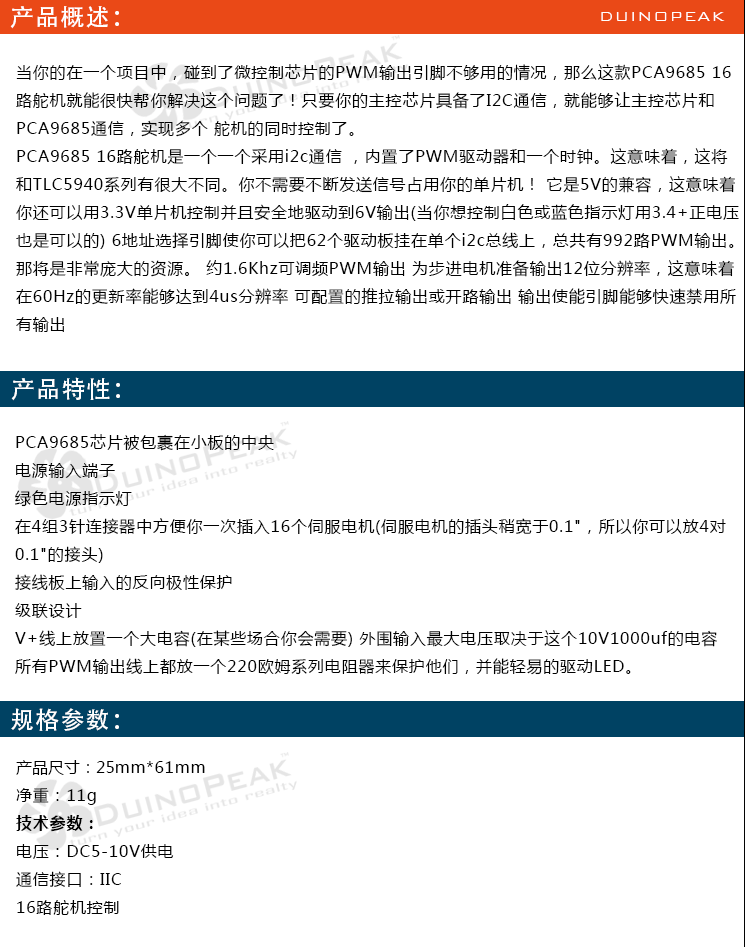
<style>
.page{position:relative;width:745px;height:947px;background:#ffffff}
.page>*{position:absolute;margin:0}
.t1{font:24px "AdobeHeitiStd-Regular";letter-spacing:0.05em;color:#ffffff}
.t2{font:18px "BankGothicBT-Light";letter-spacing:0.05em;color:#ffffff}
.t3{font:16px "MicrosoftYaHei";letter-spacing:0.05em;color:#000000}
.t4{font:16px "MicrosoftYaHei";color:#000000}
.t5{font:16px "MicrosoftYaHei-Bold";letter-spacing:0.05em;color:#000000}
</style>
<div class="page">
<p class="t1" style="left:10px;top:6px;width:109px;height:23px">产品概述：</p>
<p class="t2" style="left:601px;top:12px;width:124px;height:9px">DUINOPEAK</p>
<p class="t3" style="left:16px;top:64px;width:723px;height:268px">当你的在一个项目中，碰到了微控制芯片的PWM输出引脚不够用的情况，那么这款PCA9685 16<br>路舵机就能很快帮你解决这个问题了！只要你的主控芯片具备了I2C通信，就能够让主控芯片和<br>PCA9685通信，实现多个 舵机的同时控制了。 <br>PCA9685 16路舵机是一个一个采用i2c通信 ，内置了PWM驱动器和一个时钟。这意味着，这将<br>和TLC5940系列有很大不同。你不需要不断发送信号占用你的单片机！ 它是5V的兼容，这意味着<br>你还可以用3.3V单片机控制并且安全地驱动到6V输出(当你想控制白色或蓝色指示灯用3.4+正电压<br>也是可以的) 6地址选择引脚使你可以把62个驱动板挂在单个i2c总线上，总共有992路PWM输出。<br>那将是非常庞大的资源。 约1.6Khz可调频PWM输出 为步进电机准备输出12位分辨率，这意味着<br>在60Hz的更新率能够达到4us分辨率 可配置的推拉输出或开路输出 输出使能引脚能够快速禁用所<br>有输出</p>
<p class="t1" style="left:11px;top:377px;width:109px;height:24px">产品特性：</p>
<p class="t3" style="left:15px;top:434px;width:711px;height:241px">PCA9685芯片被包裹在小板的中央<br>电源输入端子<br>绿色电源指示灯<br>在4组3针连接器中方便你一次插入16个伺服电机(伺服电机的插头稍宽于0.1"，所以你可以放4对<br>0.1"的接头)<br>接线板上输入的反向极性保护<br>级联设计<br>V+线上放置一个大电容(在某些场合你会需要) 外围输入最大电压取决于这个10V1000uf的电容<br>所有PWM输出线上都放一个220欧姆系列电阻器来保护他们，并能轻易的驱动LED。</p>
<p class="t1" style="left:11px;top:708px;width:108px;height:23px">规格参数：</p>
<p class="t3" style="left:16px;top:760px;width:189px;height:155px"><span class="t4">产品尺寸：25</span>mm*61mm<br>净重：11g<br><span class="t5">技术参数：<br></span>电压：DC5-10V供电<br>通信接口：IIC<br>16路舵机控制</p>
</div>
